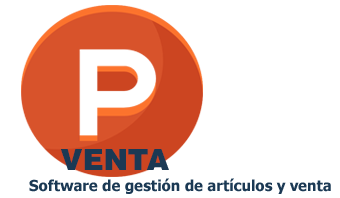
<style>
.page{position:relative;width:340px;height:198px;background:#ffffff}
.page>*{position:absolute;margin:0}
.t1{font:29.3px "HelveticaLTStd-Blk";color:#1b3954}
.t2{font:15px "Tahoma-Bold";color:#1b3954}
</style>
<div class="page">
<p class="t1" style="left:60px;top:149px;width:109px;height:21px">VENTA</p>
<p class="t2" style="left:29px;top:178px;width:302px;height:16px">Software de gestión de artículos y venta</p>
</div>
